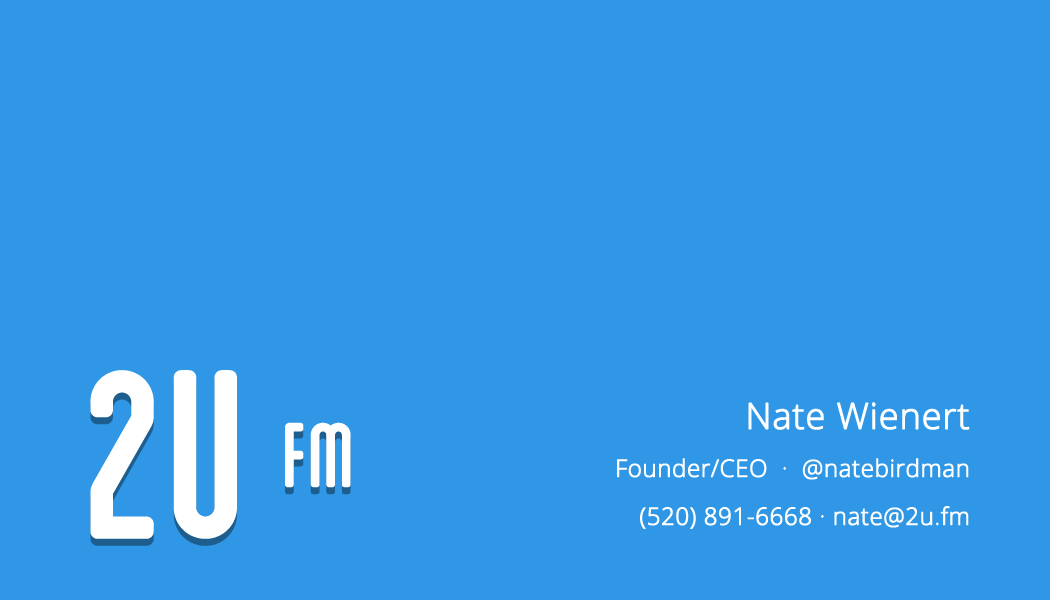
<style>
.page{position:relative;width:1050px;height:600px;background:#3097e6}
.page>*{position:absolute;margin:0}
.t1{font:243.5px "Blanch-Condensed";color:#ffffff;text-transform:uppercase;font-weight:bold}
.t2{font:24px/48px "OpenSans-Light";color:#ffffff;font-weight:bold}
.t3{font:36px/48px "OpenSans-Light";color:#ffffff;font-weight:bold}
.t4{font:92.8px "Blanch-Condensed";color:#ffffff;text-transform:uppercase;font-weight:bold}
</style>
<div class="page">
<p class="t1" style="left:90px;top:370px;width:147px;height:169px">2u</p>
<p class="t2" style="left:617px;top:402px;width:353px;height:127px;text-align:right"><span class="t3">Nate Wienert<br></span>Founder/CEO  ·  @natebirdman<br> (520) 891-6668 · nate@2u.fm</p>
<p class="t4" style="left:285px;top:422px;width:66px;height:66px">fm</p>
</div>
